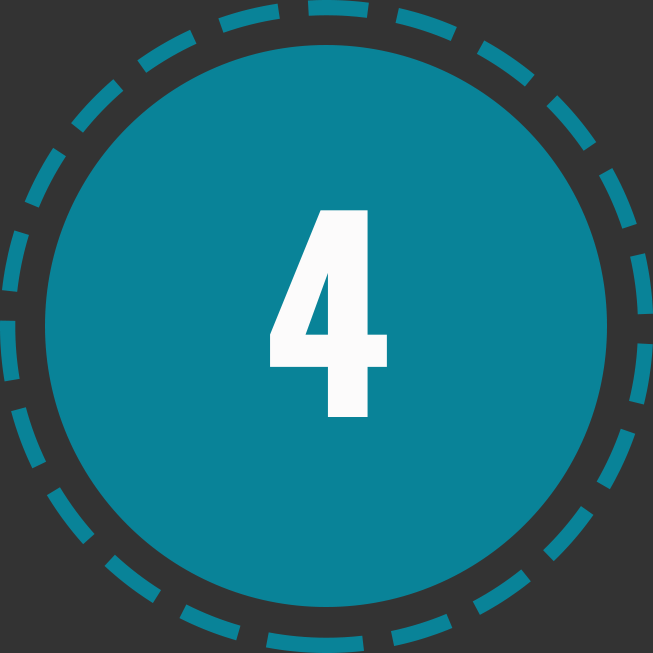
<style>
.page{position:relative;width:653px;height:653px;background:#098398}
.page>*{position:absolute;margin:0}
.t1{font:234.9px "Oswald-Bold";color:#fcfbfb}
</style>
<div class="page">
<p class="t1" style="left:270px;top:210px;width:117px;height:207px">4</p>
</div>
